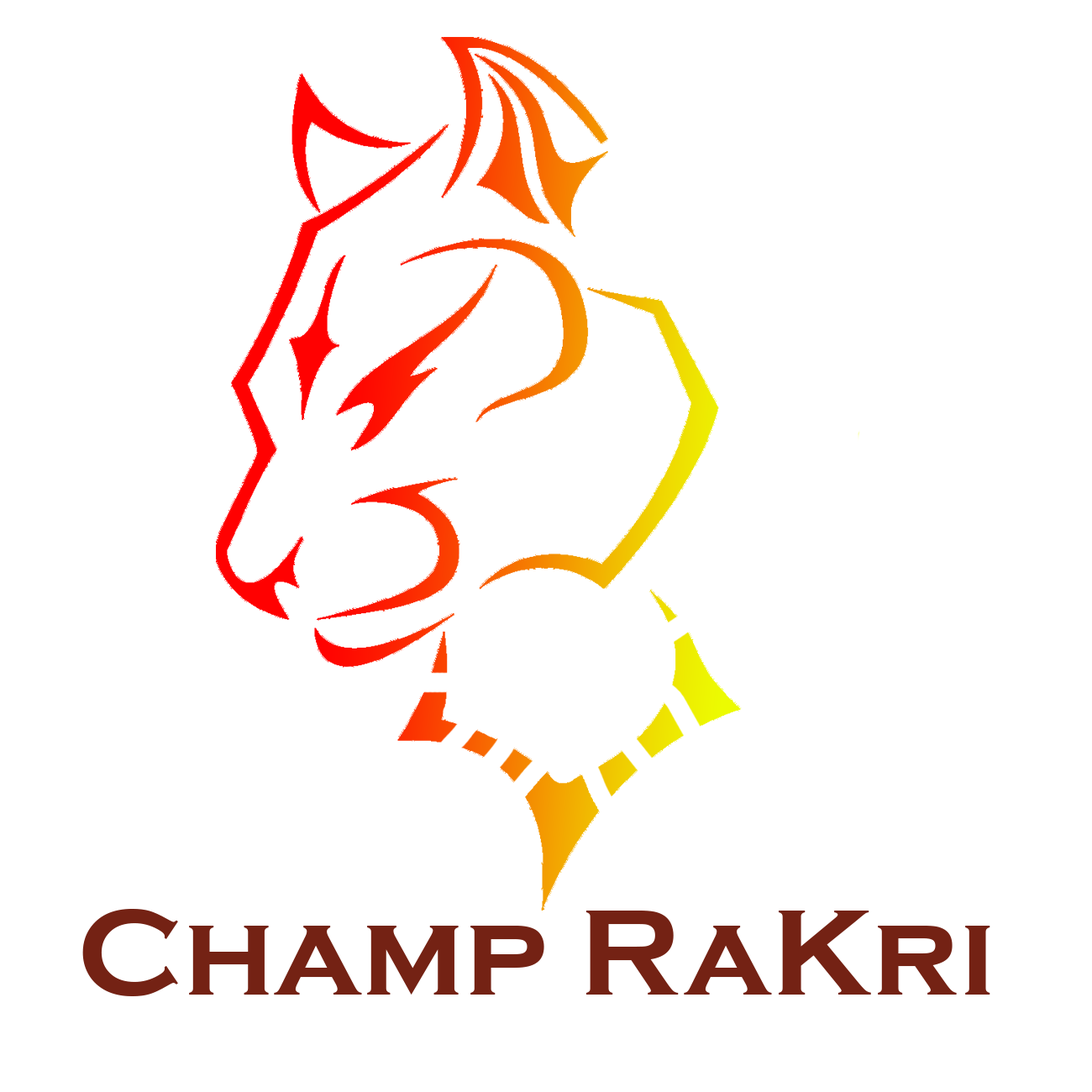
<style>
.page{position:relative;width:1092px;height:1092px;background:#ffffff}
.page>*{position:absolute;margin:0}
.t1{font:126px "CopperplateGothic-Bold";color:#742214}
</style>
<div class="page">
<p class="t1" style="left:82px;top:909px;width:908px;height:87px">Champ RaKri</p>
</div>
